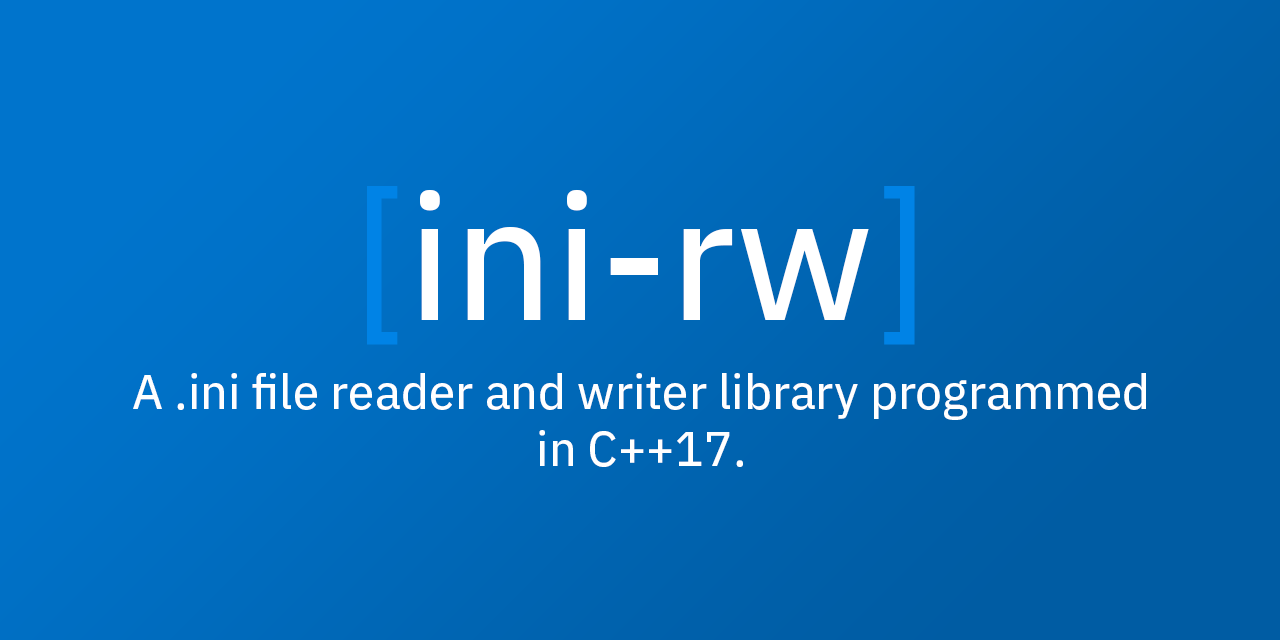
<style>
.page{position:relative;width:1280px;height:640px}
.page>*{position:absolute;margin:0}
.t1{font:176px "IBMPlexSans-Text";color:#ffffff}
.t2{font:176px "IBMPlexSans-Text";color:#0083e6}
.t3{font:48px "IBMPlexSans-Text";color:#ffffff}
</style>
<div class="page">
<p class="t1" style="left:367px;top:186px;width:548px;height:159px"><span class="t2">[</span>ini-rw<span class="t2">]</span></p>
<p class="t3" style="left:133px;top:373px;width:1013px;height:94px;text-align:center">A .ini file reader and writer library programmed<br>in C++17.</p>
</div>
